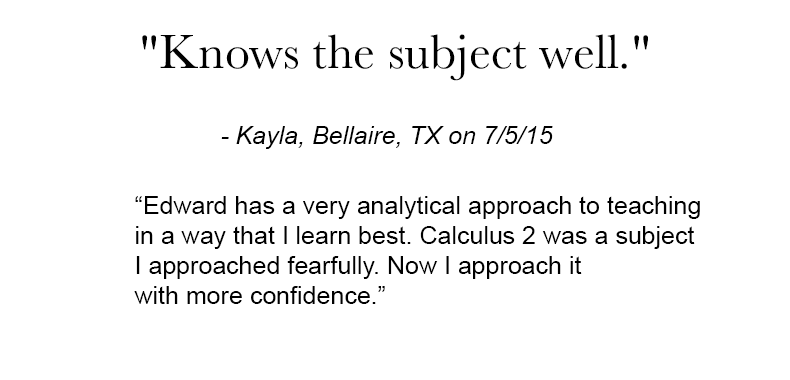
<style>
.page{position:relative;width:790px;height:380px;background:#ffffff}
.page>*{position:absolute;margin:0}
.t1{font:50px "Baskerville";color:#000000}
.t2{font:25px "Arial-ItalicMT";color:#000000}
.t3{font:25px "ArialMT";color:#000000}
</style>
<div class="page">
<p class="t1" style="left:142px;top:34px;width:506px;height:47px">"Knows the subject well."</p>
<p class="t2" style="left:221px;top:126px;width:332px;height:23px">- Kayla, Bellaire, TX on 7/5/15</p>
<p class="t3" style="left:134px;top:196px;width:566px;height:108px">“Edward has a very analytical approach to teaching <br>in a way that I learn best. Calculus 2 was a subject <br>I approached fearfully. Now I approach it <br>with more confidence.”</p>
</div>
